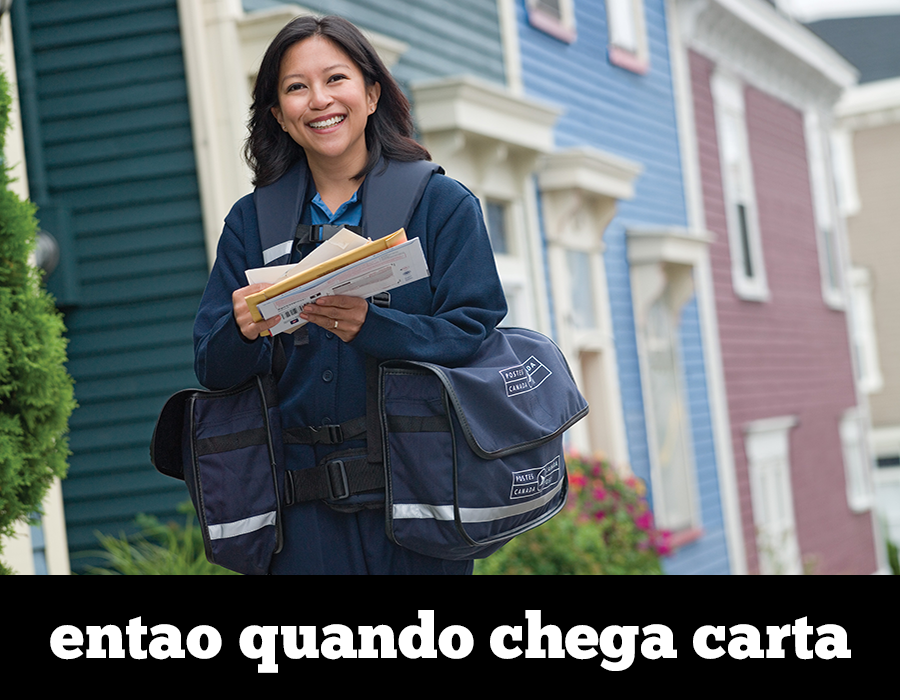
<style>
.page{position:relative;width:900px;height:700px}
.page>*{position:absolute;margin:0}
.t1{font:64px "ChunkFive-Roman";color:#ffffff}
</style>
<div class="page">
<p class="t1" style="left:50px;top:610px;width:801px;height:63px">entao quando chega carta</p>
</div>
